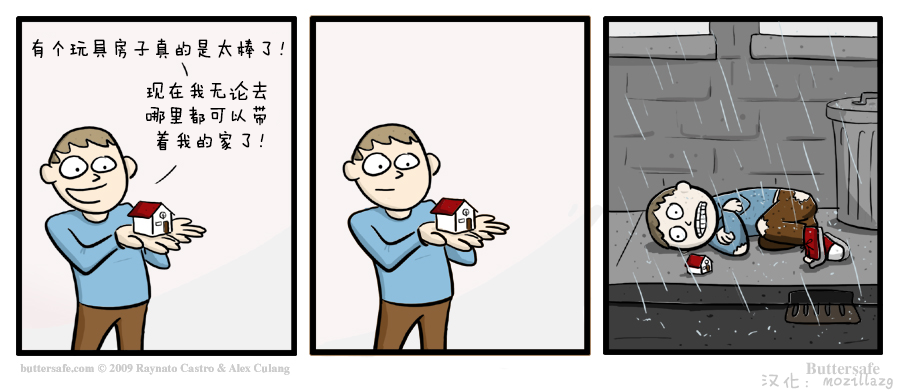
<style>
.page{position:relative;width:900px;height:392px;background:#faf4f4}
.page>*{position:absolute;margin:0}
.t1{font:20.8px "FZMWJW--GB1-0";color:#000000}
.t2{font:20.8px/25px "FZMWJW--GB1-0";color:#000000}
.t3{font:20.8px "FZMWJW--GB1-0";color:#cbcbcb}
</style>
<div class="page">
<p class="t1" style="left:32px;top:38px;width:252px;height:21px">有个玩具房子真的是太棒了！</p>
<p class="t2" style="left:146px;top:81px;width:121px;height:70px">现在我无论去<br>哪里都可以带<br> 着我的家了！</p>
<p class="t3" style="left:762px;top:372px;width:131px;height:18px">汉化：mozillazg</p>
</div>
